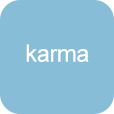
<style>
.page{position:relative;width:114px;height:114px;background:#88bdd7}
.page>*{position:absolute;margin:0}
.t1{font:24px "ArialMT";letter-spacing:-0.025em;color:#ffffff}
</style>
<div class="page">
<p class="t1" style="left:26px;top:44px;width:63px;height:18px">karma</p>
</div>
